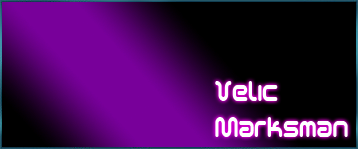
<style>
.page{position:relative;width:358px;height:149px;background:#000000}
.page>*{position:absolute;margin:0}
.t1{font:30px "SciFied2002";color:#ffffff;scale:0.8 1}
</style>
<div class="page">
<p class="t1" style="left:215px;top:81px;width:133px;height:56px">Velic<br>Marksman</p>
</div>
